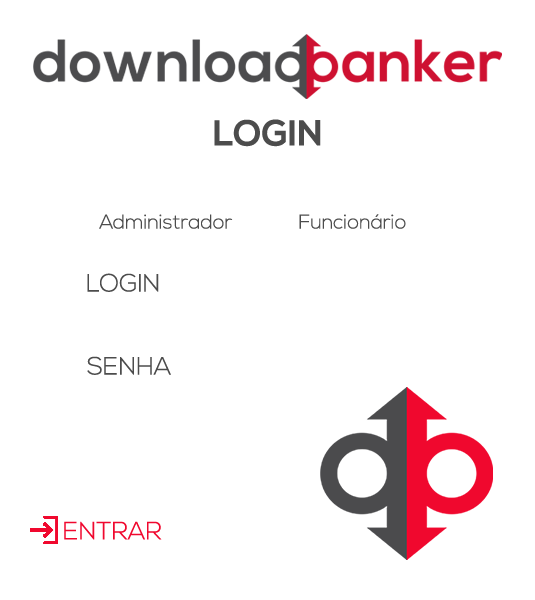
<style>
.page{position:relative;width:535px;height:600px;background:#ffffff}
.page>*{position:absolute;margin:0}
.t1{font:36px "NexaBold";color:#4c4c4c}
.t2{font:20px "NexaLight";color:#4c4c4c}
.t3{font:25px "NexaLight";color:#4c4c4c}
.t4{font:25px "NexaLight";color:#f0082e}
</style>
<div class="page">
<p class="t1" style="left:214px;top:119px;width:107px;height:28px">LOGIN</p>
<p class="t2" style="left:99px;top:214px;width:307px;height:15px">Administrador            Funcionário</p>
<p class="t3" style="left:87px;top:273px;width:72px;height:19px">LOGIN</p>
<p class="t3" style="left:87px;top:356px;width:84px;height:19px">SENHA</p>
<p class="t4" style="left:64px;top:521px;width:98px;height:19px">ENTRAR</p>
</div>
